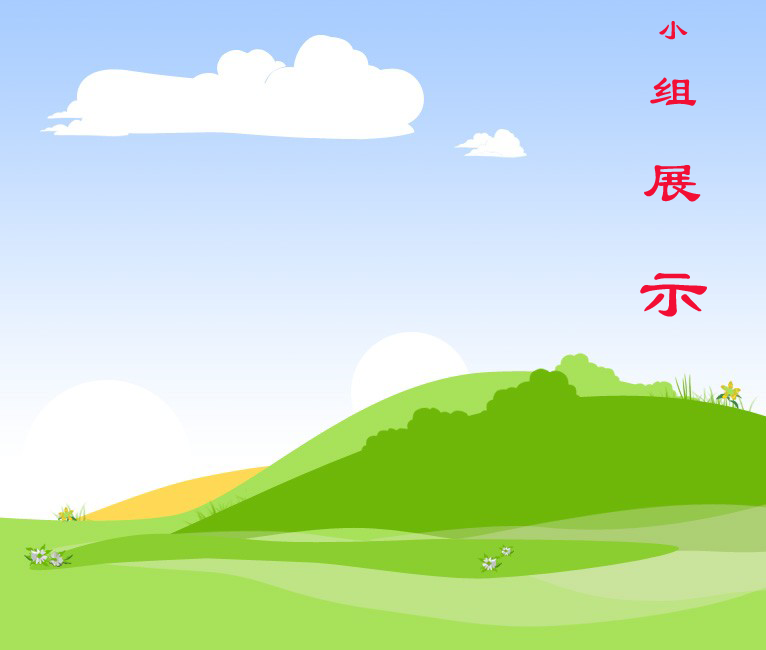
<style>
.page{position:relative;width:766px;height:650px}
.page>*{position:absolute;margin:0}
.t1{font:30px "LiSu";letter-spacing:0.025em;color:#f20e34}
.t2{font:48px "LiSu";letter-spacing:0.025em;color:#f20e34}
.t3{font:60px "LiSu";letter-spacing:0.025em;color:#f20e34}
.t4{font:72px "LiSu";letter-spacing:0.025em;color:#f20e34}
</style>
<div class="page">
<p class="t1" style="left:640px;top:21px;width:67px;height:296px;text-align:center">小<br><span class="t2">组</span><span class="t3">展</span><span class="t4">示</span></p>
</div>
